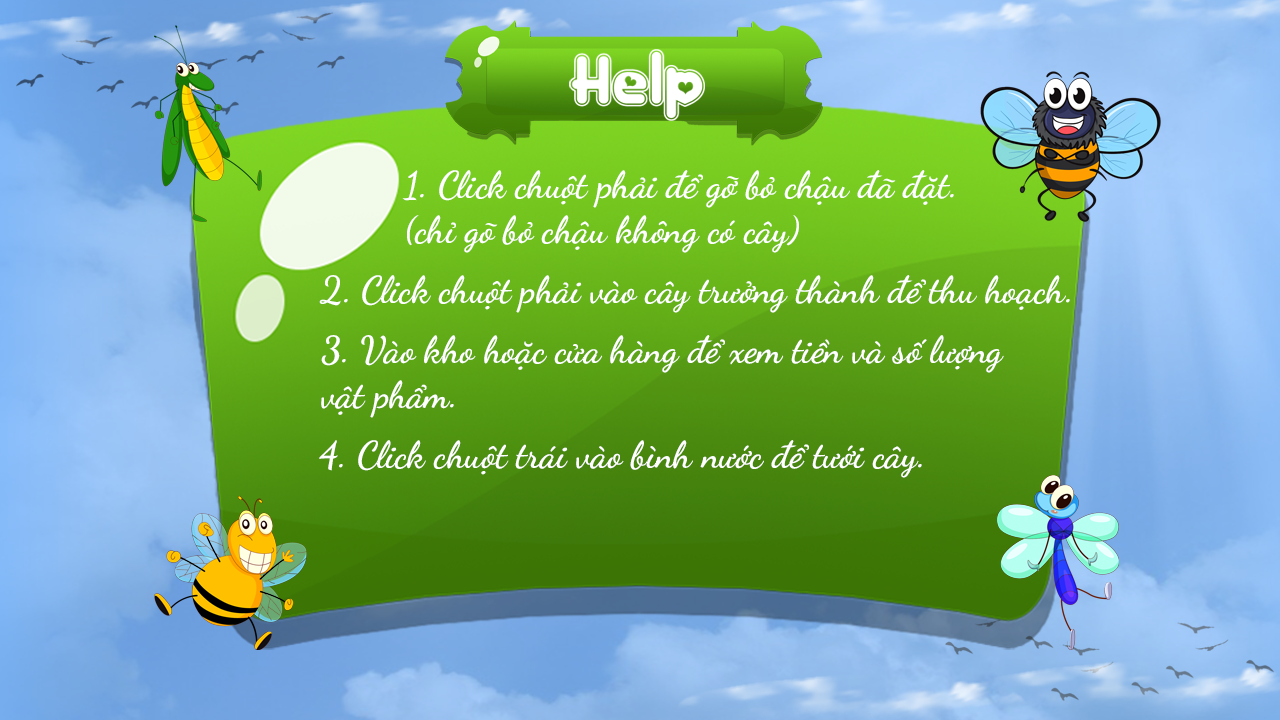
<style>
.page{position:relative;width:1280px;height:720px}
.page>*{position:absolute;margin:0}
.t1{font:37.4px "DancingScript-Bold";color:#ffffff}
</style>
<div class="page">
<p class="t1" style="left:402px;top:170px;width:552px;height:83px">1. Click chuột phải để gỡ bỏ chậu đã đặt.<br>(chỉ gõ bỏ chậu không có cây)</p>
<p class="t1" style="left:319px;top:275px;width:751px;height:38px">2. Click chuột phải vào cây trưởng thành để thu hoạch.</p>
<p class="t1" style="left:321px;top:335px;width:683px;height:83px">3. Vào kho hoặc cửa hàng để xem tiền và số lượng <br>vật phẩm.</p>
<p class="t1" style="left:319px;top:440px;width:603px;height:38px">4. Click chuột trái vào bình nước để tưới cây.</p>
</div>
